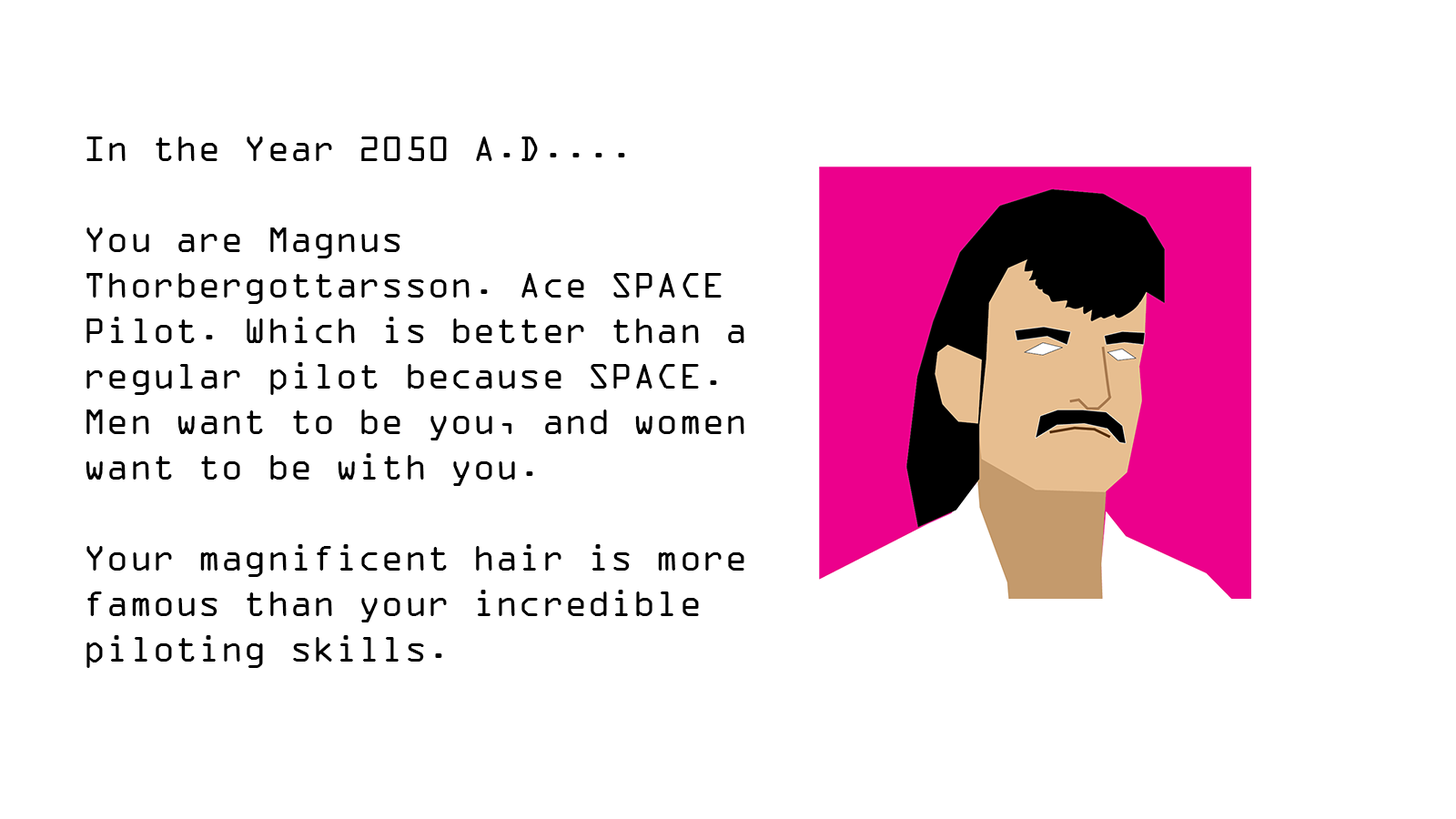
<style>
.page{position:relative;width:1456px;height:819px;background:#ffffff}
.page>*{position:absolute;margin:0}
.t1{font:37.9px "OCRAExtended";color:#000000}
</style>
<div class="page">
<p class="t1" style="left:86px;top:136px;width:658px;height:532px">In the Year 2050 A.D....<br><br>You are Magnus Thorbergottarsson. Ace SPACE Pilot. Which is better than a regular pilot because SPACE. Men want to be you, and women want to be with you. <br><br>Your magnificent hair is more famous than your incredible piloting skills.</p>
</div>
